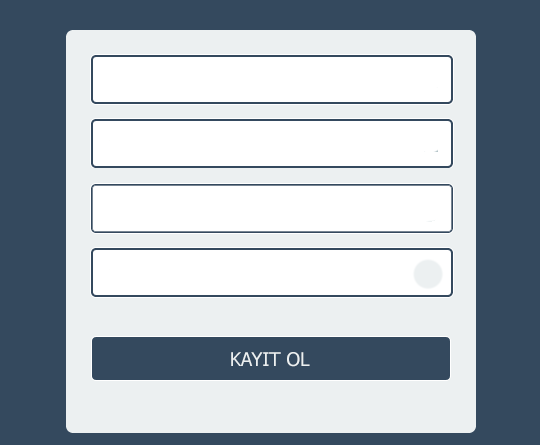
<style>
.page{position:relative;width:540px;height:445px;background:#34495e}
.page>*{position:absolute;margin:0}
.t1{font:19px "Tahoma";color:#ecf0f1}
</style>
<div class="page">
<p class="t1" style="left:231px;top:352px;width:79px;height:15px">KAYIT OL</p>
</div>
